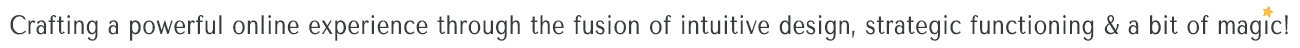
<style>
.page{position:relative;width:1300px;height:48px;background:#ffffff}
.page>*{position:absolute;margin:0}
.t1{font:26.5px "TenorSans";letter-spacing:0.018em;color:#363d3c;scale:0.84 1}
</style>
<div class="page">
<p class="t1" style="left:10px;top:15px;width:1278px;height:26px">Crafting a powerful online experience through the fusion of intuitive design, strategic functioning &amp; a bit of magic!</p>
</div>
